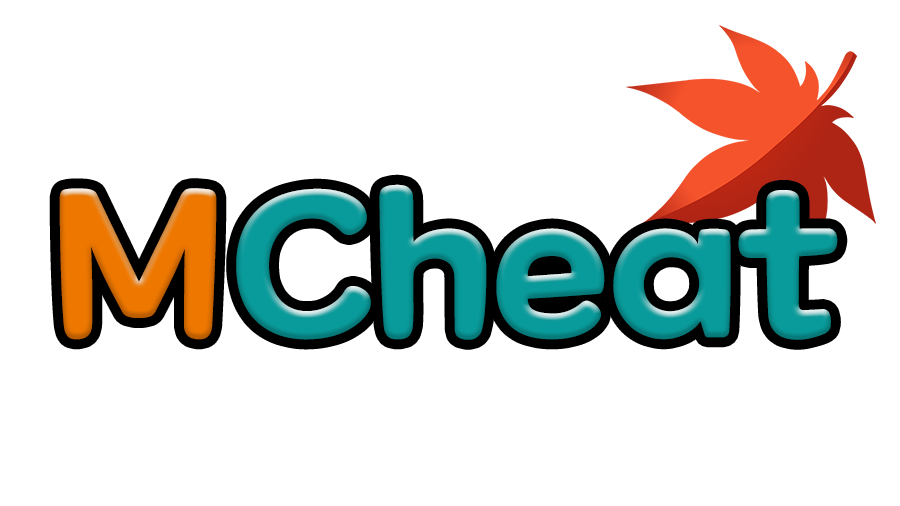
<style>
.page{position:relative;width:900px;height:506px;background:#ffffff}
.page>*{position:absolute;margin:0}
.t1{font:200px "MaplestoryBold";color:#099b9b}
.t2{font:200px "MaplestoryBold";color:#ee7700}
</style>
<div class="page">
<p class="t1" style="left:236px;top:184px;width:602px;height:156px">Cheat</p>
<p class="t2" style="left:59px;top:188px;width:158px;height:152px">M</p>
</div>
